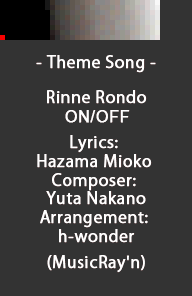
<style>
.page{position:relative;width:192px;height:296px;background:#333333}
.page>*{position:absolute;margin:0}
.t1{font:16px "KozGoPr6N-Regular";letter-spacing:0.025em;color:#ffffff;font-weight:bold}
.t2{font:16px/18.7px "KozGoPr6N-Regular";letter-spacing:0.025em;color:#ffffff;font-weight:bold}
.t3{font:16px/18.7px "ArialMT";letter-spacing:0.025em;color:#ffffff;font-weight:bold}
</style>
<div class="page">
<p class="t1" style="left:36px;top:55px;width:120px;height:18px">- Theme Song -</p>
<p class="t2" style="left:37px;top:90px;width:115px;height:183px;text-align:center">Rinne Rondo<br> <span class="t3">ON/OFF<br><br></span>Lyrics: <br>Hazama Mioko <br>Composer: <br>Yuta Nakano<br>Arrangement: <br>h-wonder<br><br>(MusicRay'n)</p>
</div>
